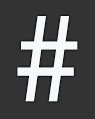
<style>
.page{position:relative;width:95px;height:119px;background:#333333}
.page>*{position:absolute;margin:0}
.t1{font:120px "Avenir-Roman";letter-spacing:0.025em;color:#f5f9f9;text-transform:uppercase}
</style>
<div class="page">
<p class="t1" style="left:17px;top:16px;width:61px;height:86px">#</p>
</div>
